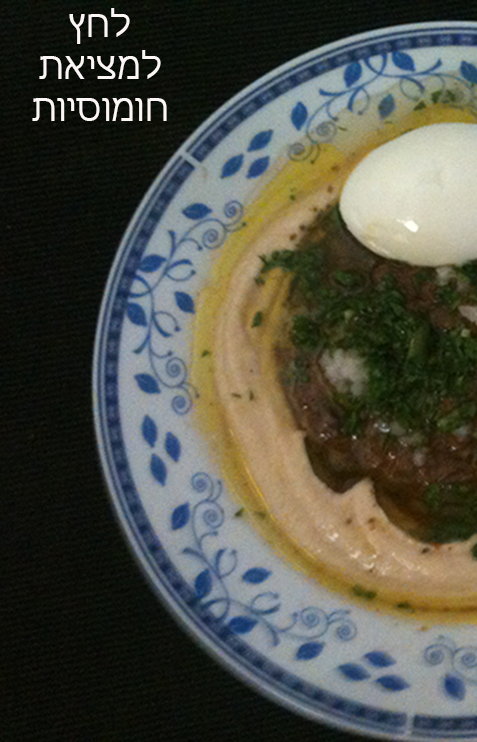
<style>
.page{position:relative;width:477px;height:742px}
.page>*{position:absolute;margin:0}
.t1{font:34.8px "Tahoma";color:#fcf6f6}
</style>
<div class="page">
<p class="t1" style="left:32px;top:8px;width:135px;height:113px;text-align:center">ץחל<br>תאיצמל<br>תויסומוח</p>
</div>
